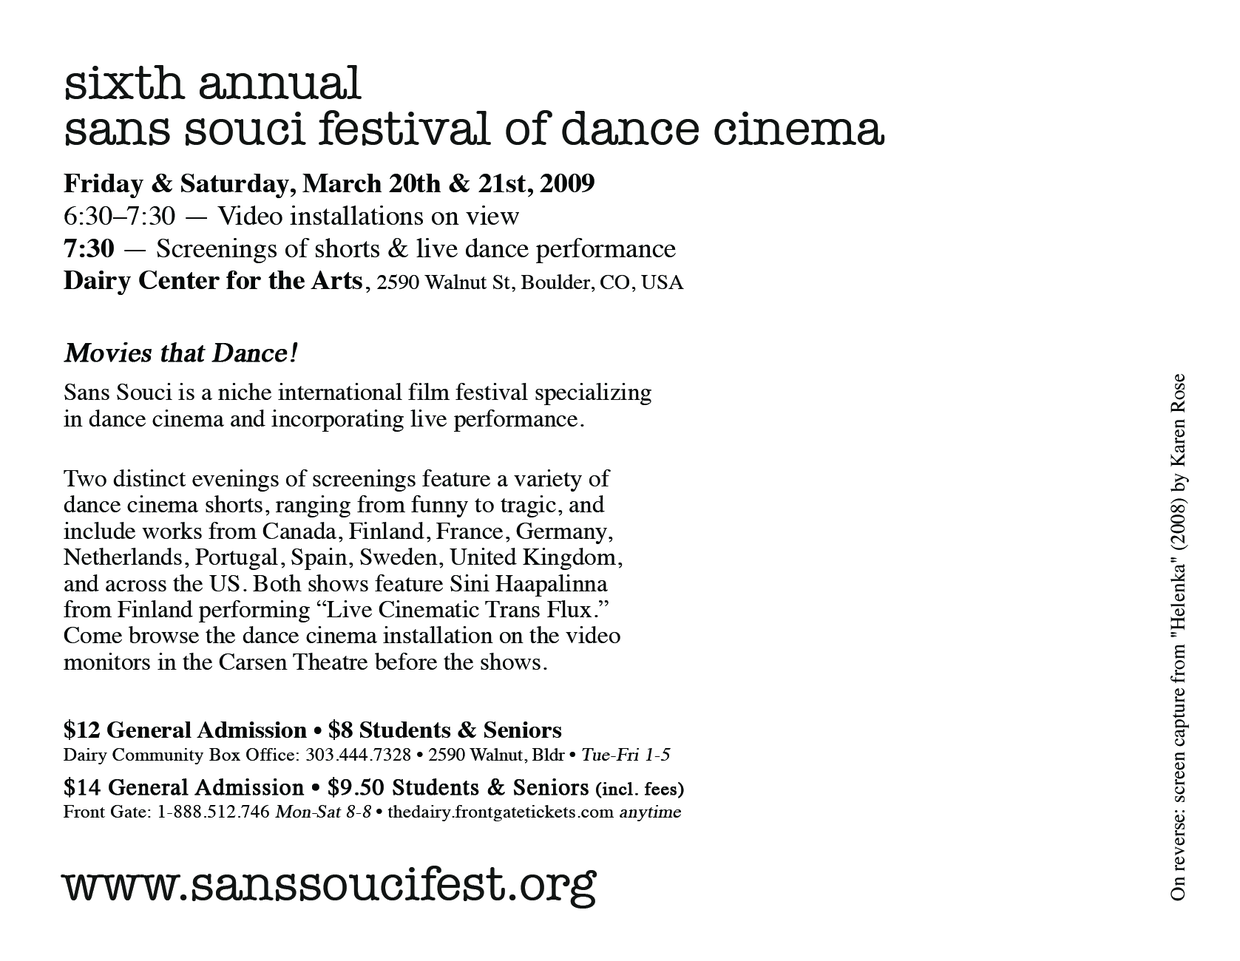
<style>
.page{position:relative;width:1240px;height:961px;background:#ffffff}
.page>*{position:absolute;margin:0}
.t1{font:49.3px/46.2px "AmericanTypewriter";color:#111413}
.t2{font:24.7px/26.2px "Times-Roman";color:#060808}
.t3{font:27.7px/32.4px "Times-Bold";color:#060808}
.t4{font:27.7px/32.4px "Times-Roman";color:#060808}
.t5{font:21.6px/32.4px "Times-Roman";color:#060808}
.t6{font:27.7px/29.3px "Times-Roman";color:#060808;font-weight:bold;font-style:italic}
.t7{font:24.7px/33.9px "Times-Bold";color:#060808}
.t8{font:18.5px/23.1px "Times-Roman";letter-spacing:0.02em;color:#060808}
.t9{font:18.5px/23.1px "Times-Roman";color:#060808}
.t10{font:18.5px/23.1px "Times-Roman";letter-spacing:0.02em;color:#060808;font-style:italic}
.t11{font:23.1px/33.9px "Times-Roman";letter-spacing:0.02em;color:#060808;font-weight:bold}
.t12{font:18.5px/33.9px "Times-Roman";letter-spacing:0.02em;color:#060808;font-weight:bold}
.t13{font:20px "Times-Roman";color:#060808}
.t14{font:49.3px "AmericanTypewriter";color:#111413}
</style>
<div class="page">
<p class="t1" style="left:65px;top:65px;width:820px;height:81px">sixth annual<br>sans souci festival of dance cinema</p>
<p class="t2" style="left:64px;top:174px;width:620px;height:648px"><span class="t3">Friday &amp; Saturday, March 20th &amp; 21st, 2009<br></span><span class="t4">6:30–7:30 — Video installations on view<br></span><span class="t3">7:30 </span><span class="t4">— Screenings of shorts &amp; live dance performance<br></span><span class="t3">Dairy Center for the Arts</span><span class="t4">, </span><span class="t5">2590 Walnut St, Boulder, CO, USA<br><br></span><span class="t6">Movies that Dance!<br><br></span>Sans Souci is a niche international film festival specializing<br>in dance cinema and incorporating live performance.<br><br>Two distinct evenings of screenings feature a variety of <br>dance cinema shorts, ranging from funny to tragic, and <br>include works from Canada, Finland, France, Germany, <br>Netherlands, Portugal, Spain, Sweden, United Kingdom, <br>and across the US. Both shows feature Sini Haapalinna <br>from Finland performing “Live Cinematic Trans Flux.” <br>Come browse the dance cinema installation on the video <br>monitors in the Carsen Theatre before the shows.<br><br><span class="t7">$12 General Admission • $8 Students &amp; Seniors<br></span><span class="t8">Dairy Community Box Office: 303.444.7328 • </span><span class="t9">2590 Walnut, Bldr • </span><span class="t10">Tue-Fri 1-5<br></span><span class="t11">$14 General Admission • $9.50 Students &amp; Seniors</span><span class="t12"> (incl. fees)<br></span><span class="t8">Front Gate: 1-888.512.746 </span><span class="t10">Mon-Sat 8-8 </span><span class="t8">• thedairy.frontgatetickets.com </span><span class="t10">anytime</span></p>
<p class="t13" style="left:1171px;top:373px;width:18px;height:529px;rotate:-90deg">On reverse: screen capture from "Helenka" (2008) by Karen Rose</p>
<p class="t14" style="left:61px;top:866px;width:537px;height:43px">www.sanssoucifest.org</p>
</div>
